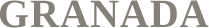
<style>
.page{position:relative;width:209px;height:28px;background:#ffffff}
.page>*{position:absolute;margin:0}
.t1{font:40px "Tinos-Bold";letter-spacing:0.025em;color:#868176}
</style>
<div class="page">
<p class="t1" style="left:0px;top:0px;width:209px;height:28px">GRANADA</p>
</div>
